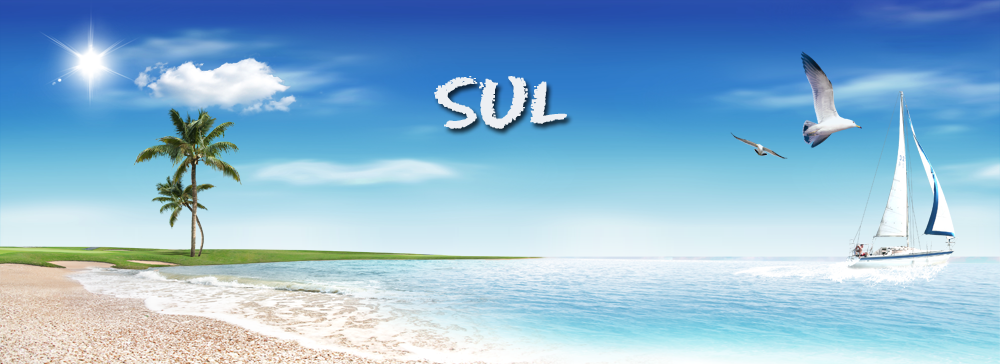
<style>
.page{position:relative;width:1000px;height:364px}
.page>*{position:absolute;margin:0}
.t1{font:65.1px "Eraser-Regular";letter-spacing:-0.005em;color:#eceff3;font-weight:bold}
</style>
<div class="page">
<p class="t1" style="left:434px;top:76px;width:133px;height:53px">SUL</p>
</div>
